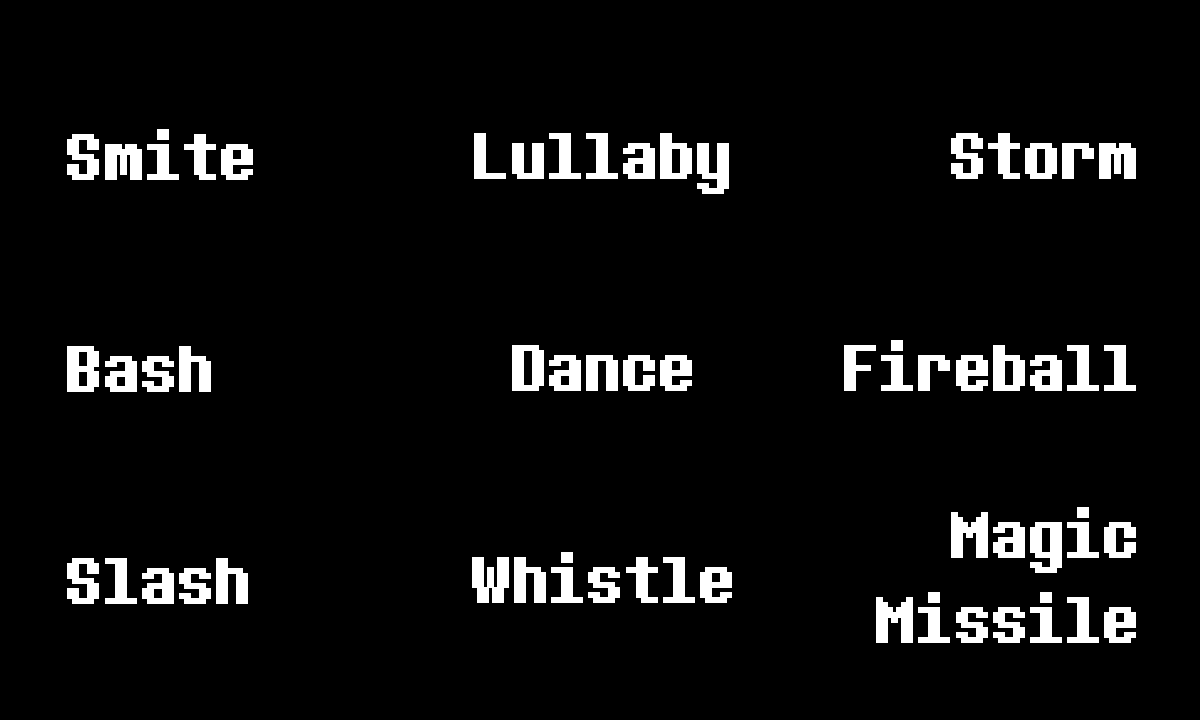
<style>
.page{position:relative;width:1200px;height:720px;background:#000000}
.page>*{position:absolute;margin:0}
.t1{font:80px/212px "8bitoperator-JVE";color:#ffffff;font-weight:bold}
.t2{font:80px/166.7px "8bitoperator-JVE";color:#ffffff;font-weight:bold}
.t3{font:80px/85.3px "8bitoperator-JVE";color:#ffffff;font-weight:bold}
</style>
<div class="page">
<p class="t1" style="left:67px;top:129px;width:186px;height:475px">Smite<br>Bash<br>Slash</p>
<p class="t1" style="left:472px;top:133px;width:260px;height:470px;text-align:center">Lullaby<br>Dance<br>Whistle</p>
<p class="t1" style="left:844px;top:133px;width:292px;height:510px;text-align:right">Storm<br>Fireball<br><span class="t2">Magic<br></span><span class="t3">Missile</span></p>
</div>
